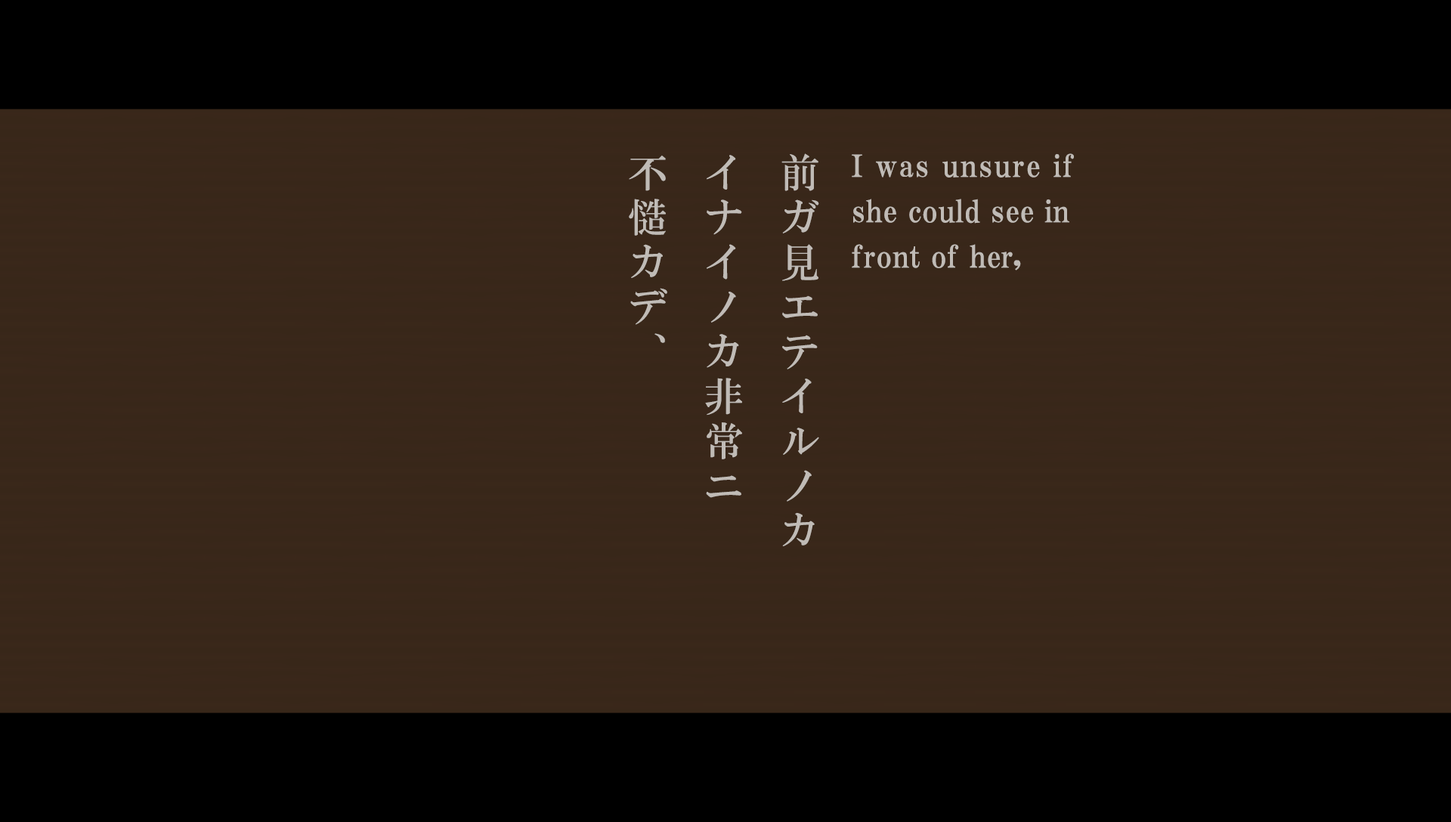
<style>
.page{position:relative;width:1451px;height:822px;background:#382719}
.page>*{position:absolute;margin:0}
.t1{font:39.6px/75.8px "HGMinchoB";letter-spacing:0.13em;color:#c0bbb6}
.t2{font:30.2px/45.3px "HGPMinchoE";letter-spacing:0.01em;color:#c0bbb6}
.t3{font:30.2px/45.3px "HGPMinchoE";letter-spacing:0.05em;color:#c0bbb6}
</style>
<div class="page">
<p class="t1" style="left:629px;top:153px;width:190px;height:393px">前ガ見エテイルノカ<br>イナイノカ非常ニ<br>不慥カデ、</p>
<p class="t2" style="left:851px;top:153px;width:223px;height:117px"><span class="t3">I was unsure if<br></span>she could see in<br>front of her,</p>
</div>
